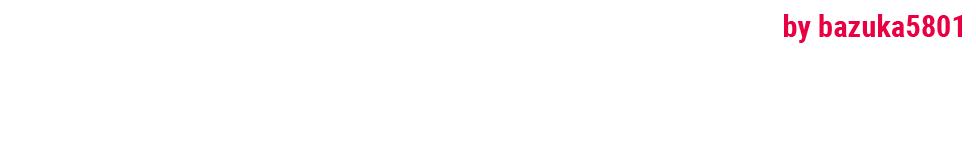
<style>
.page{position:relative;width:976px;height:152px;background:#ffffff}
.page>*{position:absolute;margin:0}
.t1{font:30.5px "RobotoCondensed-Bold";color:#e90042}
</style>
<div class="page">
<p class="t1" style="left:784px;top:14px;width:178px;height:29px">by bazuka5801</p>
</div>
